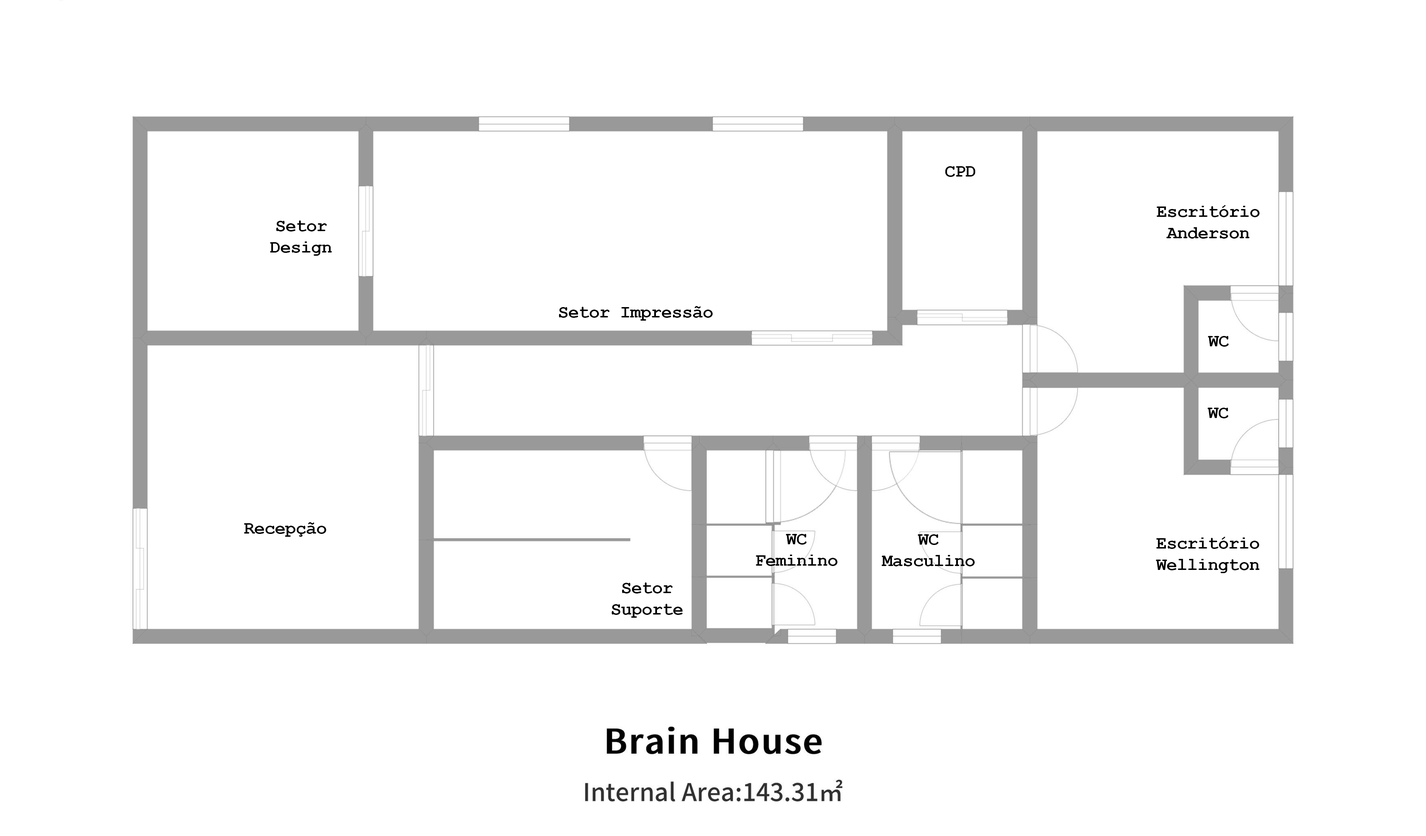
<style>
.page{position:relative;width:1426px;height:836px;background:#ffffff}
.page>*{position:absolute;margin:0}
.t1{font:17.8px "CourierNewPS-BoldMT";letter-spacing:-0.02em;color:#000000}
</style>
<div class="page">
<p class="t1" style="left:945px;top:166px;width:31px;height:11px">CPD</p>
<p class="t1" style="left:1157px;top:205px;width:103px;height:34px;text-align:center">Escritório<br>Anderson</p>
<p class="t1" style="left:270px;top:220px;width:62px;height:36px;text-align:center">Setor<br>Design</p>
<p class="t1" style="left:559px;top:306px;width:154px;height:15px">Setor Impressão</p>
<p class="t1" style="left:1208px;top:336px;width:21px;height:11px">WC</p>
<p class="t1" style="left:1208px;top:408px;width:21px;height:10px">WC</p>
<p class="t1" style="left:244px;top:522px;width:82px;height:15px">Recepção</p>
<p class="t1" style="left:756px;top:534px;width:82px;height:32px;text-align:center">WC<br>Feminino</p>
<p class="t1" style="left:882px;top:534px;width:93px;height:32px;text-align:center">WC<br>Masculino</p>
<p class="t1" style="left:1156px;top:537px;width:104px;height:36px;text-align:center">Escritório<br>Wellington</p>
<p class="t1" style="left:612px;top:582px;width:71px;height:36px;text-align:center">Setor<br>Suporte</p>
</div>
